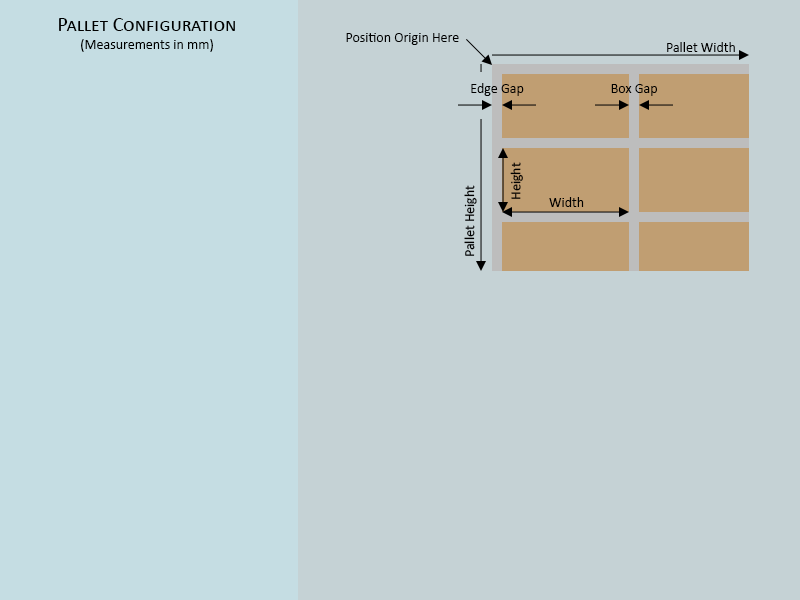
<style>
.page{position:relative;width:800px;height:600px;background:#c5d2d5}
.page>*{position:absolute;margin:0}
.t1{font:20px/18px "Calibri";color:#000000;font-variant:small-caps}
.t2{font:14px/18px "Calibri";color:#000000}
.t3{font:14px "Calibri";color:#000000}
</style>
<div class="page">
<p class="t1" style="left:59px;top:18px;width:176px;height:34px;text-align:center">Pallet Configuration<br><span class="t2">(Measurements in mm)</span></p>
<p class="t3" style="left:346px;top:33px;width:113px;height:12px">Position Origin Here</p>
<p class="t3" style="left:667px;top:42px;width:68px;height:10px">Pallet Width</p>
<p class="t3" style="left:471px;top:83px;width:53px;height:13px">Edge Gap</p>
<p class="t3" style="left:611px;top:84px;width:46px;height:12px">Box Gap</p>
<p class="t3" style="left:510px;top:162px;width:13px;height:37px;rotate:-90deg">Height</p>
<p class="t3" style="left:464px;top:185px;width:13px;height:71px;rotate:-90deg">Pallet Height</p>
<p class="t3" style="left:549px;top:197px;width:35px;height:10px">Width</p>
</div>
